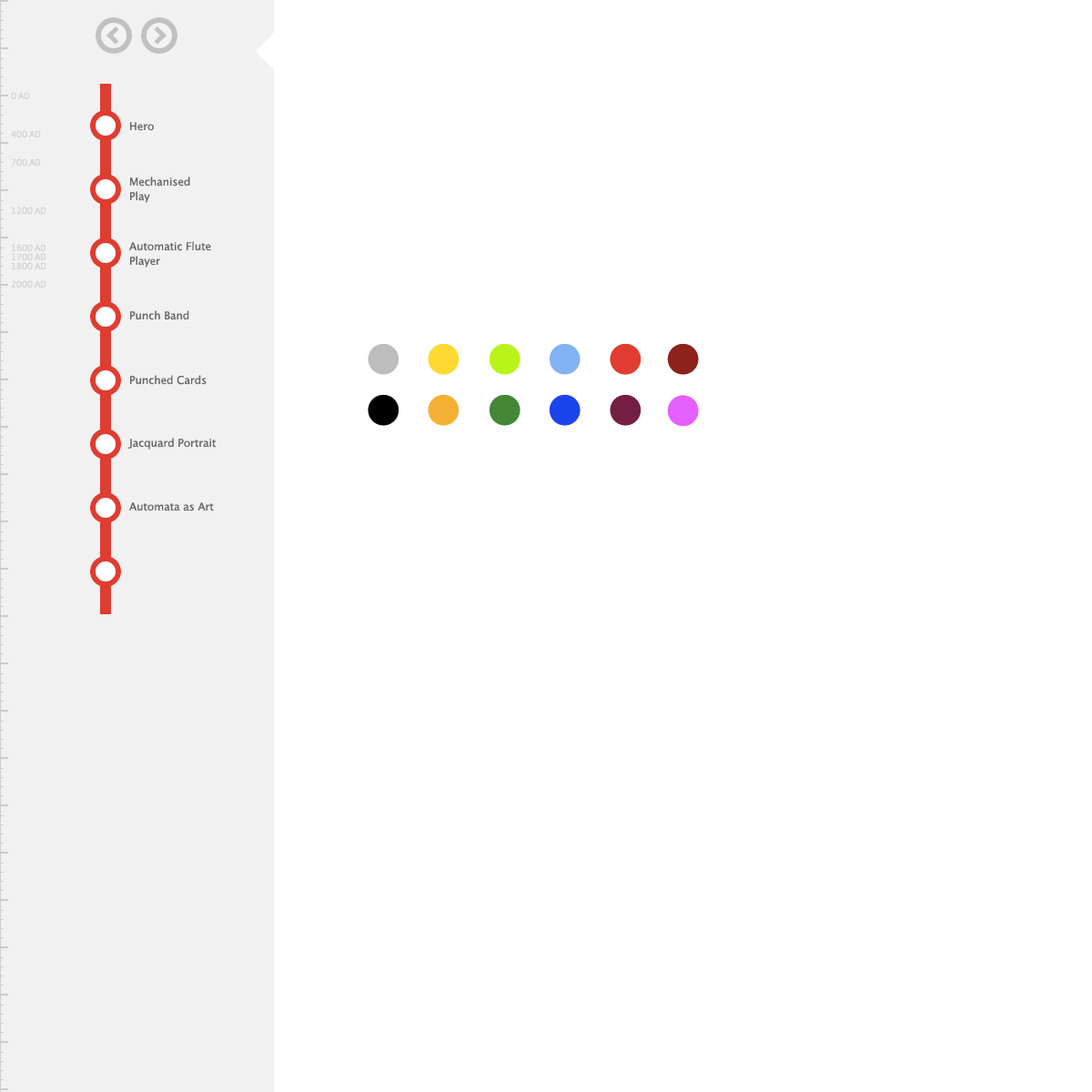
<style>
.page{position:relative;width:1092px;height:1092px;background:#ffffff}
.page>*{position:absolute;margin:0}
.t1{font:10.9px "LucidaGrande";letter-spacing:-0.01em;color:#676767}
.t2{font:10.9px/14.6px "LucidaGrande";letter-spacing:-0.01em;color:#676767}
</style>
<div class="page">
<p class="t1" style="left:130px;top:122px;width:24px;height:9px">Hero</p>
<p class="t2" style="left:130px;top:177px;width:60px;height:26px">Mechanised <br>Play</p>
<p class="t2" style="left:129px;top:241px;width:82px;height:27px">Automatic Flute<br>Player</p>
<p class="t1" style="left:130px;top:310px;width:59px;height:10px">Punch Band</p>
<p class="t1" style="left:130px;top:375px;width:77px;height:10px">Punched Cards</p>
<p class="t1" style="left:127px;top:438px;width:89px;height:12px">Jacquard Portrait</p>
<p class="t1" style="left:129px;top:502px;width:85px;height:9px">Automata as Art</p>
</div>
